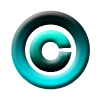
<style>
.page{position:relative;width:100px;height:100px;background:#ffffff}
.page>*{position:absolute;margin:0}
.t1{font:59.8px "Bauhaus93"}
</style>
<div class="page">
<p class="t1" style="left:29px;top:30px;width:43px;height:42px">C</p>
</div>
